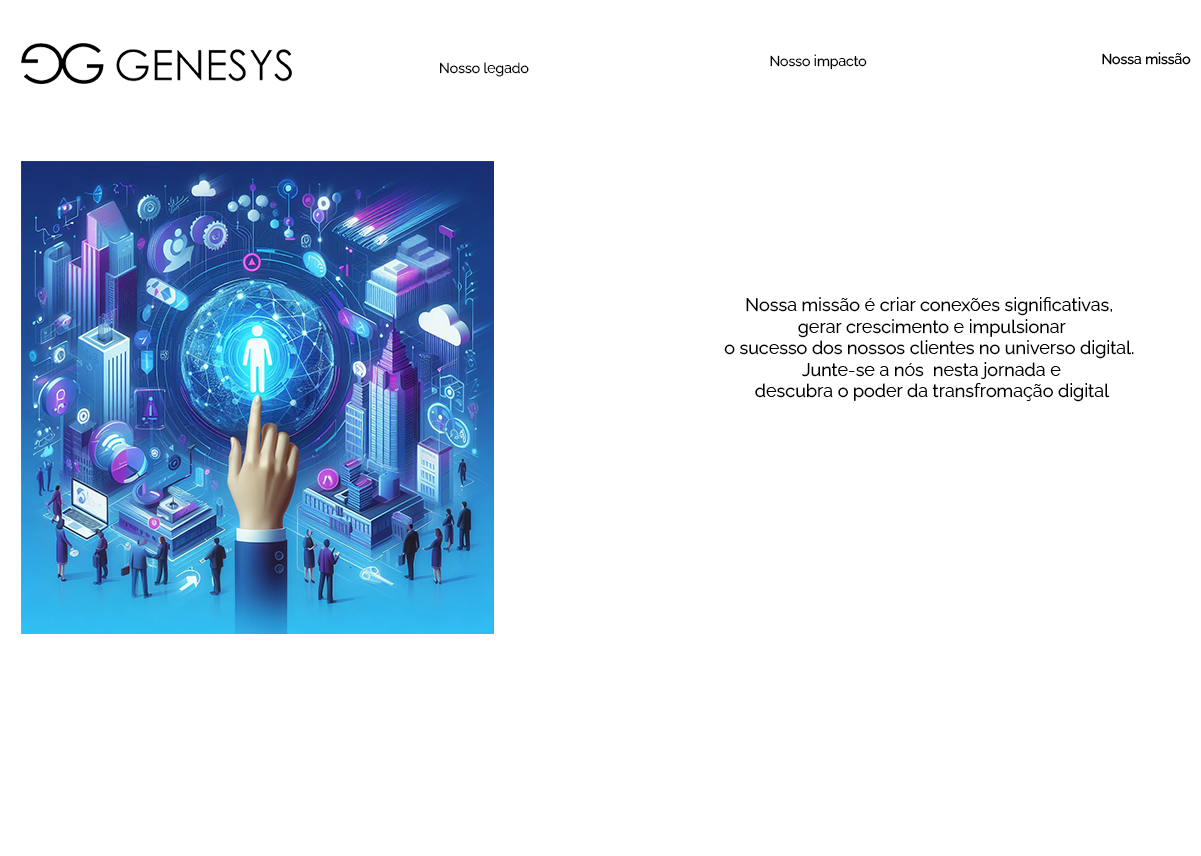
<style>
.page{position:relative;width:1201px;height:856px;background:#ffffff}
.page>*{position:absolute;margin:0}
.t1{font:14px "RalewayRoman-Regular";color:#000000}
.t2{font:18px "RalewayRoman-Regular";color:#000000}
</style>
<div class="page">
<p class="t1" style="left:770px;top:54px;width:97px;height:16px">Nosso impacto</p>
<p class="t1" style="left:1102px;top:52px;width:89px;height:13px">Nossa missão</p>
<p class="t1" style="left:440px;top:62px;width:89px;height:15px">Nosso legado</p>
<p class="t2" style="left:724px;top:297px;width:410px;height:105px;text-align:center">Nossa missão é criar conexões significativas,<br> gerar crescimento e impulsionar<br>o sucesso dos nossos clientes no universo digital.<br> Junte-se a nós  nesta jornada e<br> descubra o poder da transfromação digital</p>
</div>
